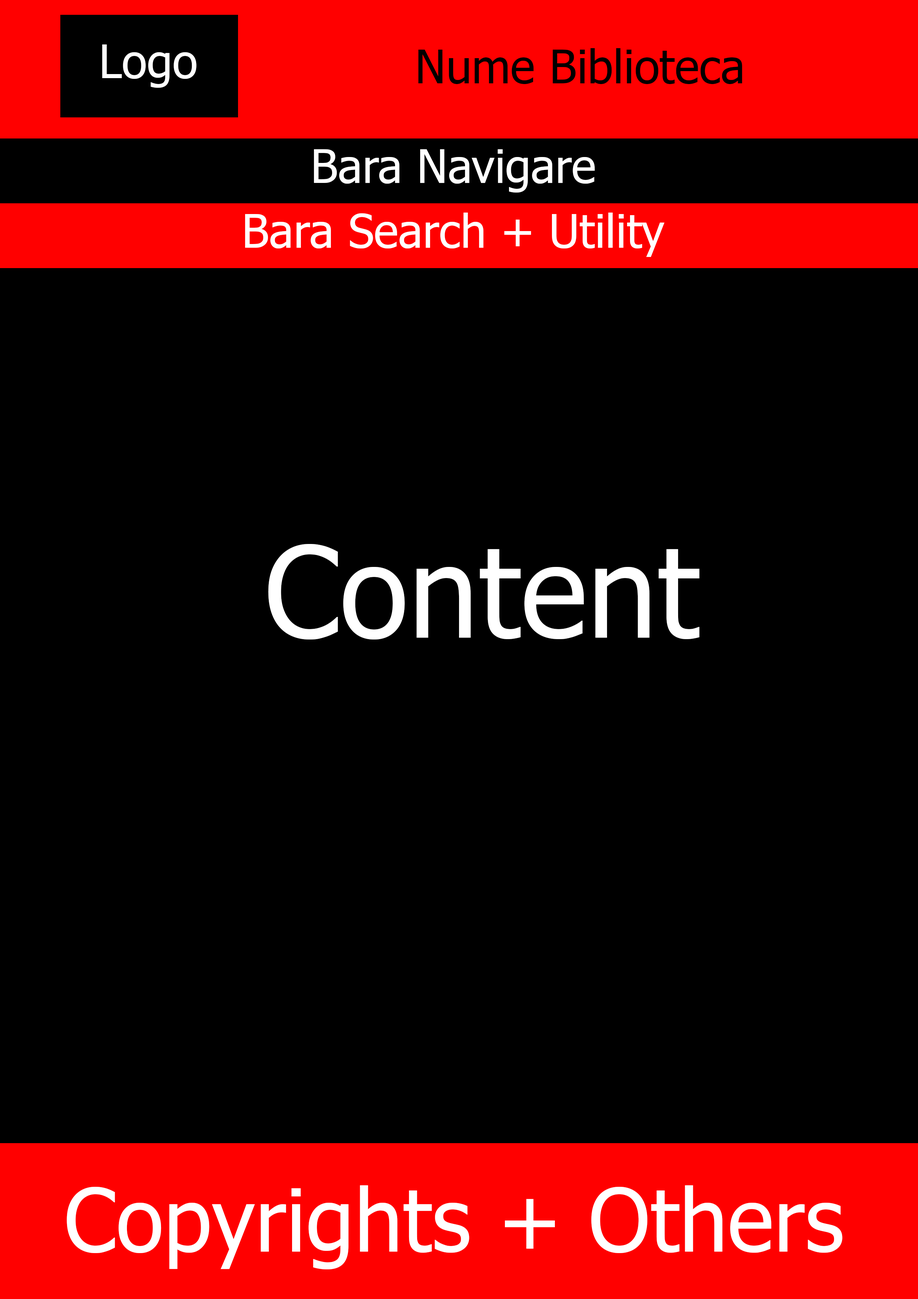
<style>
.page{position:relative;width:918px;height:1299px;background:#000000}
.page>*{position:absolute;margin:0}
.t1{font:46.3px "Tahoma";color:#ffffff}
.t2{font:46.3px "Tahoma";color:#000000}
.t3{font:126.2px "Tahoma";color:#ffffff}
.t4{font:87.2px "Tahoma";color:#ffffff}
</style>
<div class="page">
<p class="t1" style="left:102px;top:44px;width:95px;height:44px">Logo</p>
<p class="t2" style="left:418px;top:48px;width:324px;height:36px">Nume Biblioteca</p>
<p class="t1" style="left:314px;top:149px;width:281px;height:44px">Bara Navigare</p>
<p class="t1" style="left:245px;top:213px;width:420px;height:44px">Bara Search + Utility</p>
<p class="t3" style="left:268px;top:543px;width:432px;height:96px">Content</p>
<p class="t4" style="left:67px;top:1185px;width:776px;height:84px">Copyrights + Others</p>
</div>
